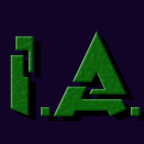
<style>
.page{position:relative;width:144px;height:144px;background:#110426}
.page>*{position:absolute;margin:0}
.t1{font:114.3px "OriginTechDemoRegular";letter-spacing:0.005em;color:#0b6309;scale:1.03 1}
</style>
<div class="page">
<p class="t1" style="left:10px;top:31px;width:131px;height:86px">I.A.</p>
</div>
